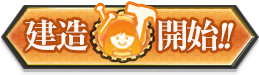
<style>
.page{position:relative;width:259px;height:75px}
.page>*{position:absolute;margin:0}
.t1{font:34px "RyuminPro-ExBold";letter-spacing:-0.08em;color:#fff6f1}
.t2{font:34px "RyuminPro-ExBold";letter-spacing:-0.08em;color:#fff6f1;font-style:italic}
</style>
<div class="page">
<p class="t1" style="left:25px;top:19px;width:209px;height:32px">建造        開始<span class="t2">!!</span></p>
</div>
